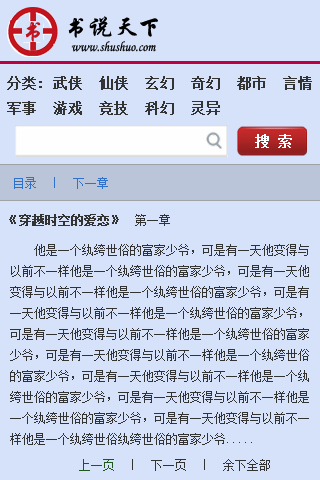
<style>
.page{position:relative;width:320px;height:480px;background:#d6e2fa}
.page>*{position:absolute;margin:0}
.t1{font:24px "STXingkai";letter-spacing:0.025em;color:#090909}
.t2{font:14px "STLiti";color:#090909;scale:0.9 1}
.t3{font:14px "SimSun";color:#ffffff;font-weight:bold}
.t4{font:12px "SimSun";color:#3072cb}
.t5{font:12px "SimSun";color:#333333;font-weight:bold}
.t6{font:12px "SimSun";color:#333333}
.t7{font:12px "SimSun";color:#1d591e}
</style>
<div class="page">
<p class="t1" style="left:68px;top:16px;width:90px;height:22px">书说天下</p>
<p class="t2" style="left:71px;top:41px;width:85px;height:11px">www.shushuo.com</p>
<p class="t3" style="left:255px;top:134px;width:37px;height:14px">搜 索</p>
<p class="t4" style="left:14px;top:177px;width:94px;height:12px">目录　｜　下一章</p>
<p class="t5" style="left:9px;top:214px;width:161px;height:12px">《穿越时空的爱恋》<span class="t6">　第一章</span></p>
<p class="t6" style="left:10px;top:244px;width:299px;height:201px">他是一个纨绔世俗的富家少爷，可是有一天他变得与<br>以前不一样他是一个纨绔世俗的富家少爷，可是有一天他<br>变得与以前不一样他是一个纨绔世俗的富家少爷，可是有<br>一天他变得与以前不一样他是一个纨绔世俗的富家少爷，<br>可是有一天他变得与以前不一样他是一个纨绔世俗的富家<br>少爷，可是有一天他变得与以前不一样他是一个纨绔世俗<br>的富家少爷，可是有一天他变得与以前不一样他是一个纨<br>绔世俗的富家少爷，可是有一天他变得与以前不一样他是<br>一个纨绔世俗的富家少爷，可是有一天他变得与以前不一<br>样他是一个纨绔世俗纨绔世俗的富家少爷.....</p>
<p class="t6" style="left:79px;top:459px;width:191px;height:12px"><span class="t7">上一页　</span>｜　下一页　｜　余下全部</p>
</div>
